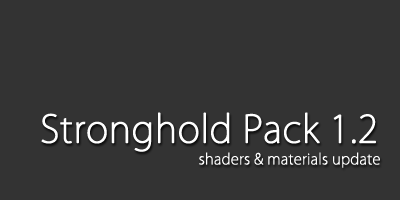
<style>
.page{position:relative;width:400px;height:200px;background:#333333}
.page>*{position:absolute;margin:0}
.t1{font:36.9px "KozGoPr6N-ExtraLight";color:#ffffff;font-weight:bold}
.t2{font:14.6px "KozGoPr6N-ExtraLight";color:#ffffff;font-weight:bold}
</style>
<div class="page">
<p class="t1" style="left:41px;top:112px;width:335px;height:40px">Stronghold Pack 1.2</p>
<p class="t2" style="left:199px;top:152px;width:181px;height:16px">shaders &amp; materials update</p>
</div>
